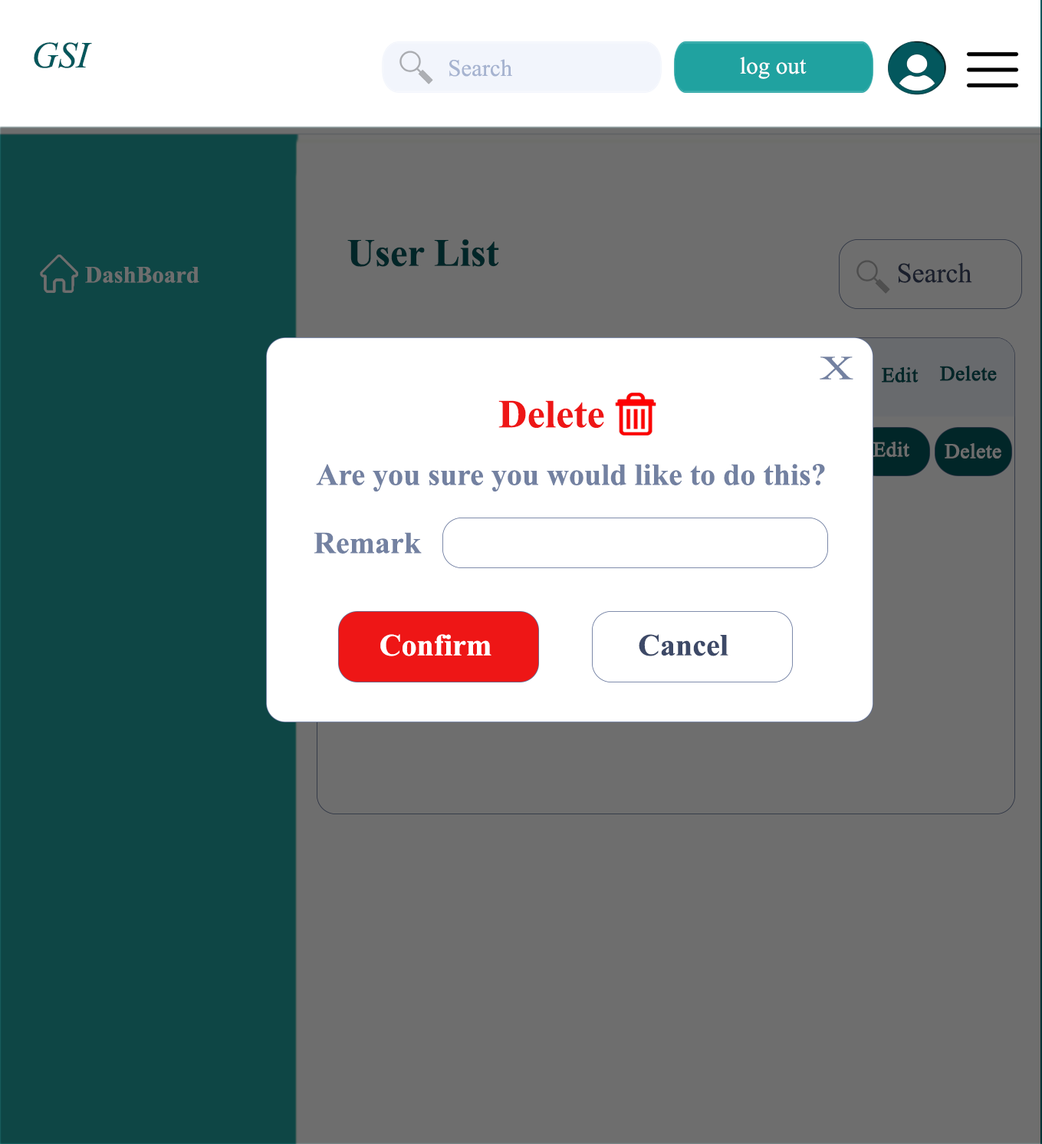
<style>
.page{position:relative;width:1042px;height:1144px;background:#6e6e6e}
.page>*{position:absolute;margin:0}
.t1{font:36.8px "TimesNewRomanPS-ItalicMT";color:#02575c}
.t2{font:23.7px "TimesNewRomanPSMT";color:#a6b3d0}
.t3{font:23.7px "TimesNewRomanPSMT";color:#ffffff}
.t4{font:39px "TimesNewRomanPS-BoldMT";color:#012628}
.t5{font:23.7px "TimesNewRomanPS-BoldMT";color:#6e6e6e}
.t6{font:27.6px "TimesNewRomanPSMT";color:#1a1f2c}
.t7{font:33.7px "TimesNewRomanPSMT";color:#7381a1;scale:1.39 1}
.t8{font:20.6px "TimesNewRomanPSMT";color:#012628;font-weight:bold}
.t9{font:39.9px "TimesNewRomanPS-BoldMT";color:#ee1616}
.t10{font:20.6px "TimesNewRomanPSMT";color:#6e6e6e;font-weight:bold}
.t11{font:30.7px "TimesNewRomanPS-BoldMT";color:#7381a1}
.t12{font:30.7px "TimesNewRomanPS-BoldMT";color:#ffffff}
.t13{font:30.7px "TimesNewRomanPS-BoldMT";color:#3d4967}
</style>
<div class="page">
<p class="t1" style="left:34px;top:42px;width:58px;height:26px">GSI</p>
<p class="t2" style="left:449px;top:59px;width:63px;height:18px">Search</p>
<p class="t3" style="left:740px;top:57px;width:67px;height:22px">log out</p>
<p class="t4" style="left:347px;top:239px;width:152px;height:28px">User List</p>
<p class="t5" style="left:85px;top:267px;width:114px;height:16px">DashBoard</p>
<p class="t6" style="left:898px;top:263px;width:74px;height:20px">Search</p>
<p class="t7" style="left:820px;top:357px;width:34px;height:23px">X</p>
<p class="t8" style="left:940px;top:365px;width:57px;height:16px">Delete</p>
<p class="t8" style="left:882px;top:367px;width:37px;height:16px">Edit</p>
<p class="t9" style="left:498px;top:400px;width:127px;height:28px">Delete !</p>
<p class="t10" style="left:873px;top:442px;width:37px;height:15px">Edit</p>
<p class="t10" style="left:945px;top:443px;width:57px;height:16px">Delete</p>
<p class="t11" style="left:316px;top:464px;width:509px;height:28px">Are you sure you would like to do this?</p>
<p class="t11" style="left:314px;top:532px;width:108px;height:22px">Remark</p>
<p class="t12" style="left:380px;top:634px;width:112px;height:22px">Confirm</p>
<p class="t13" style="left:639px;top:634px;width:90px;height:22px">Cancel</p>
</div>
